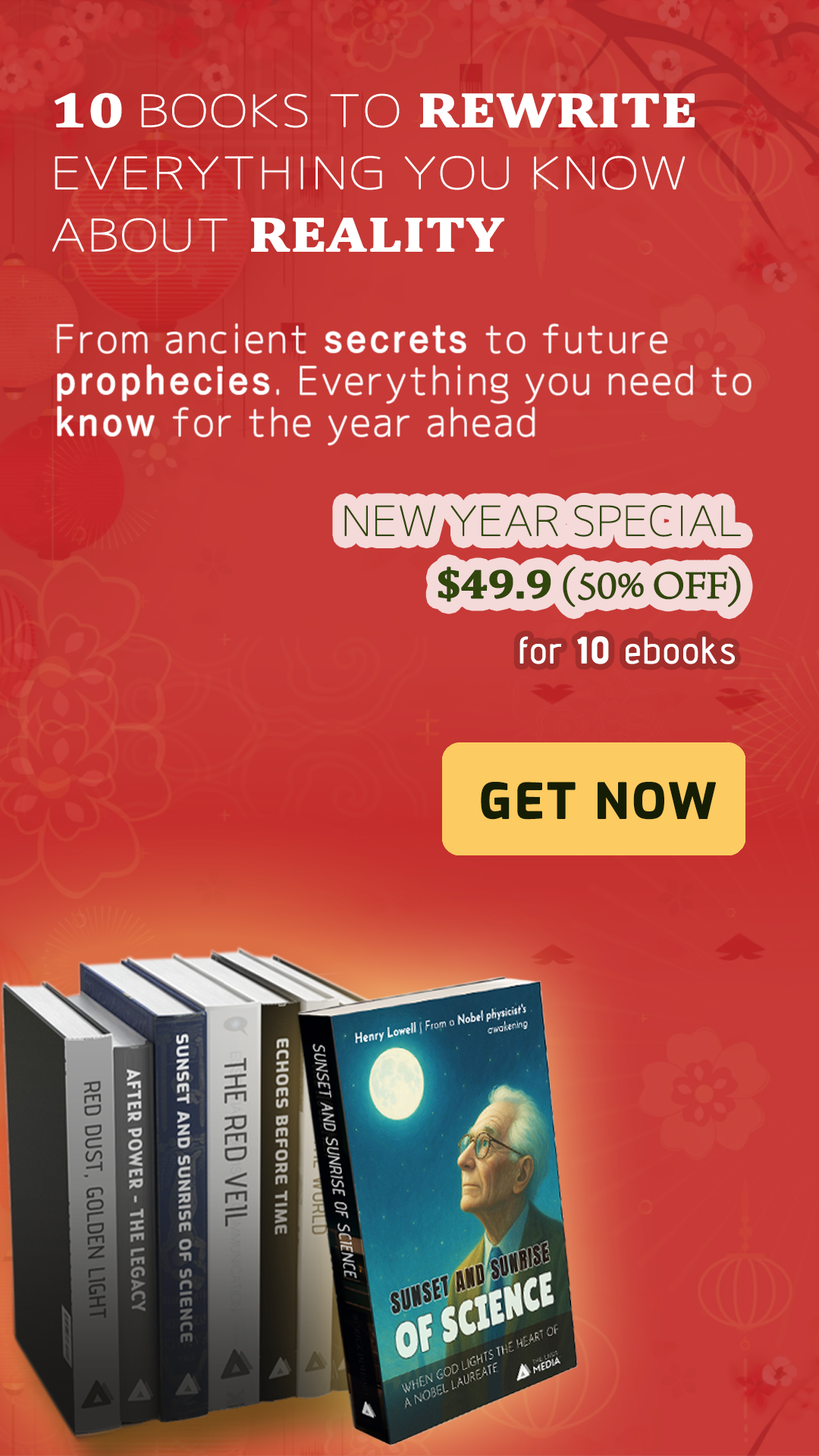
<style>
.page{position:relative;width:819px;height:1456px}
.page>*{position:absolute;margin:0}
.t1{font:43.7px/62.2px "Chogokuboso-Gothic";color:#ffffff;font-weight:bold;scale:1.25 1}
.t2{font:48.5px/62.2px "Cambria-Bold";color:#ffffff;font-weight:bold;scale:1.25 1}
.t3{font:37.5px/41.7px "Chogokuboso-Gothic";letter-spacing:0.05em;color:#ffffff;font-weight:bold}
.t4{font:37.5px/41.7px "YuGothic-Regular";letter-spacing:0.05em;color:#ffffff;font-weight:bold}
.t5{font:40.9px/62.2px "Chogokuboso-Gothic";letter-spacing:-0.025em;color:#31460c;font-weight:bold;scale:1.11 1}
.t6{font:40.9px/62.2px "Cambria-Bold";letter-spacing:-0.025em;color:#31460c;font-weight:bold;scale:1.11 1}
.t7{font:40.9px/62.2px "ArnoPro-LightDisplay";letter-spacing:-0.025em;color:#31460c;font-weight:bold;scale:1.11 1}
.t8{font:36.4px "AdventPro-Regular";letter-spacing:0.05em;color:#ffffff;font-weight:bold}
.t9{font:36.4px "AdventPro-Bold";letter-spacing:0.05em;color:#ffffff;font-weight:bold}
.t10{font:47.8px "Exo-Bold";letter-spacing:0.05em;color:#151e05;font-weight:bold}
</style>
<div class="page">
<p class="t1" style="left:52px;top:93px;width:643px;height:160px"><span class="t2">10 </span>BOOKS TO <span class="t2">REWRITE </span>EVERYTHING YOU KNOW ABOUT <span class="t2">REALITY</span></p>
<p class="t3" style="left:57px;top:324px;width:694px;height:121px">From ancient <span class="t4">secrets </span>to future <span class="t4">prophecies</span>. Everything you need to <span class="t4">know </span>for the year ahead</p>
<p class="t5" style="left:344px;top:505px;width:397px;height:102px;text-align:right">NEW YEAR SPECIAL <span class="t6">$49.9</span><span class="t7"> (50% OFF)</span></p>
<p class="t8" style="left:519px;top:636px;width:216px;height:28px">for <span class="t9">10</span> ebooks</p>
<p class="t10" style="left:481px;top:782px;width:235px;height:38px">GET NOW</p>
</div>
